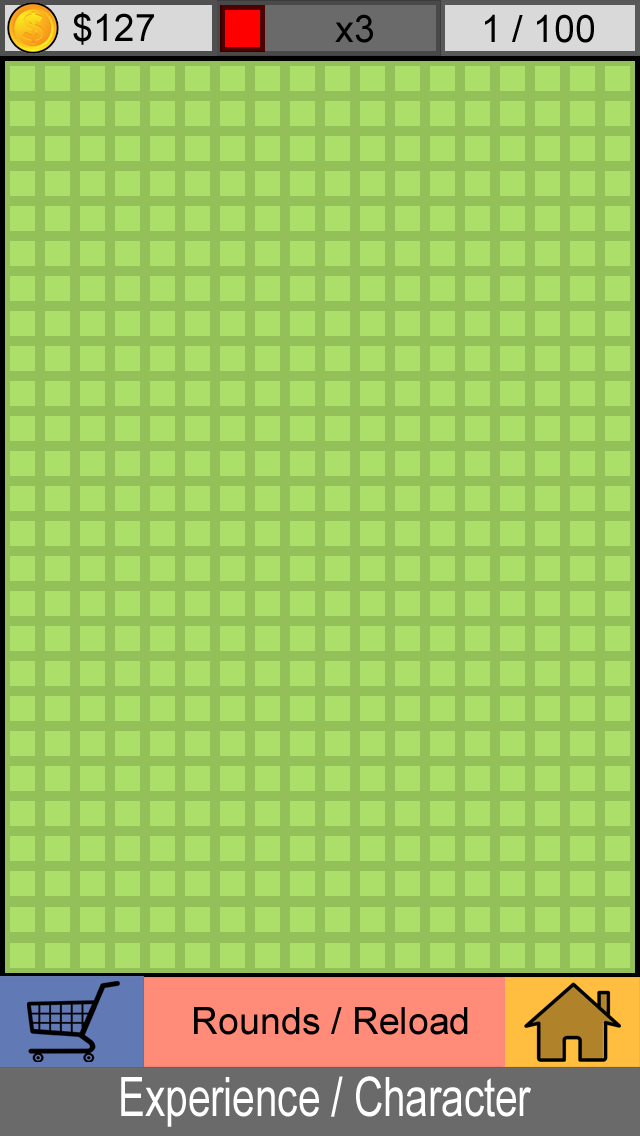
<style>
.page{position:relative;width:640px;height:1136px;background:#acdf69}
.page>*{position:absolute;margin:0}
.t1{font:37.5px "ArialMT";color:#000000}
.t2{font:54.3px "ArialMT";color:#ffffff;scale:0.74 1}
</style>
<div class="page">
<p class="t1" style="left:73px;top:12px;width:81px;height:33px">$127</p>
<p class="t1" style="left:335px;top:14px;width:38px;height:29px">x3</p>
<p class="t1" style="left:485px;top:14px;width:109px;height:29px">1 / 100</p>
<p class="t1" style="left:194px;top:1007px;width:274px;height:28px">Rounds / Reload</p>
<p class="t2" style="left:121px;top:1076px;width:410px;height:51px">Experience / Character</p>
</div>
